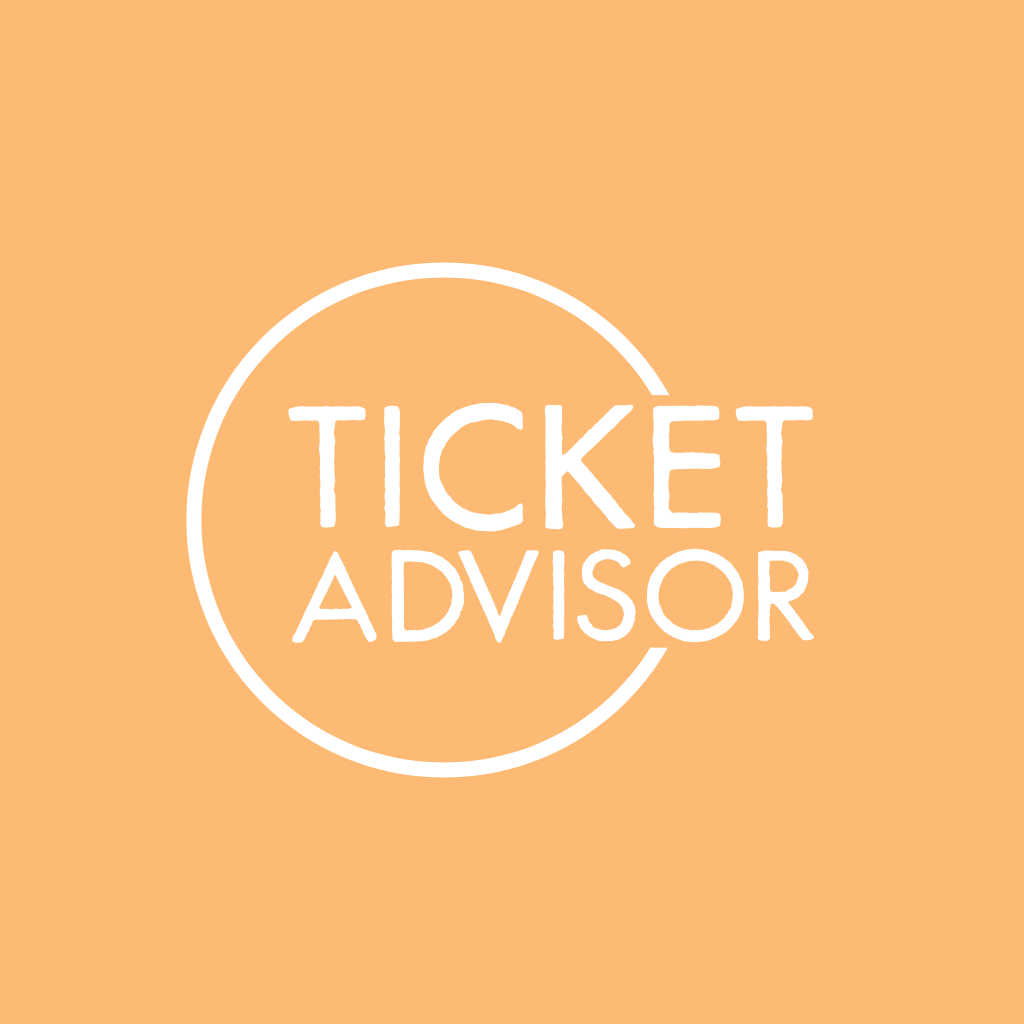
<style>
.page{position:relative;width:1024px;height:1024px;background:#fdba74}
.page>*{position:absolute;margin:0}
.t1{font:190px "FuturaRenner-Regular";color:#ffffff}
.t2{font:140px "FuturaRenner-Regular";color:#ffffff}
</style>
<div class="page">
<p class="t1" style="left:288px;top:402px;width:526px;height:130px">TICKET</p>
<p class="t2" style="left:291px;top:548px;width:523px;height:95px">ADVISOR</p>
</div>
